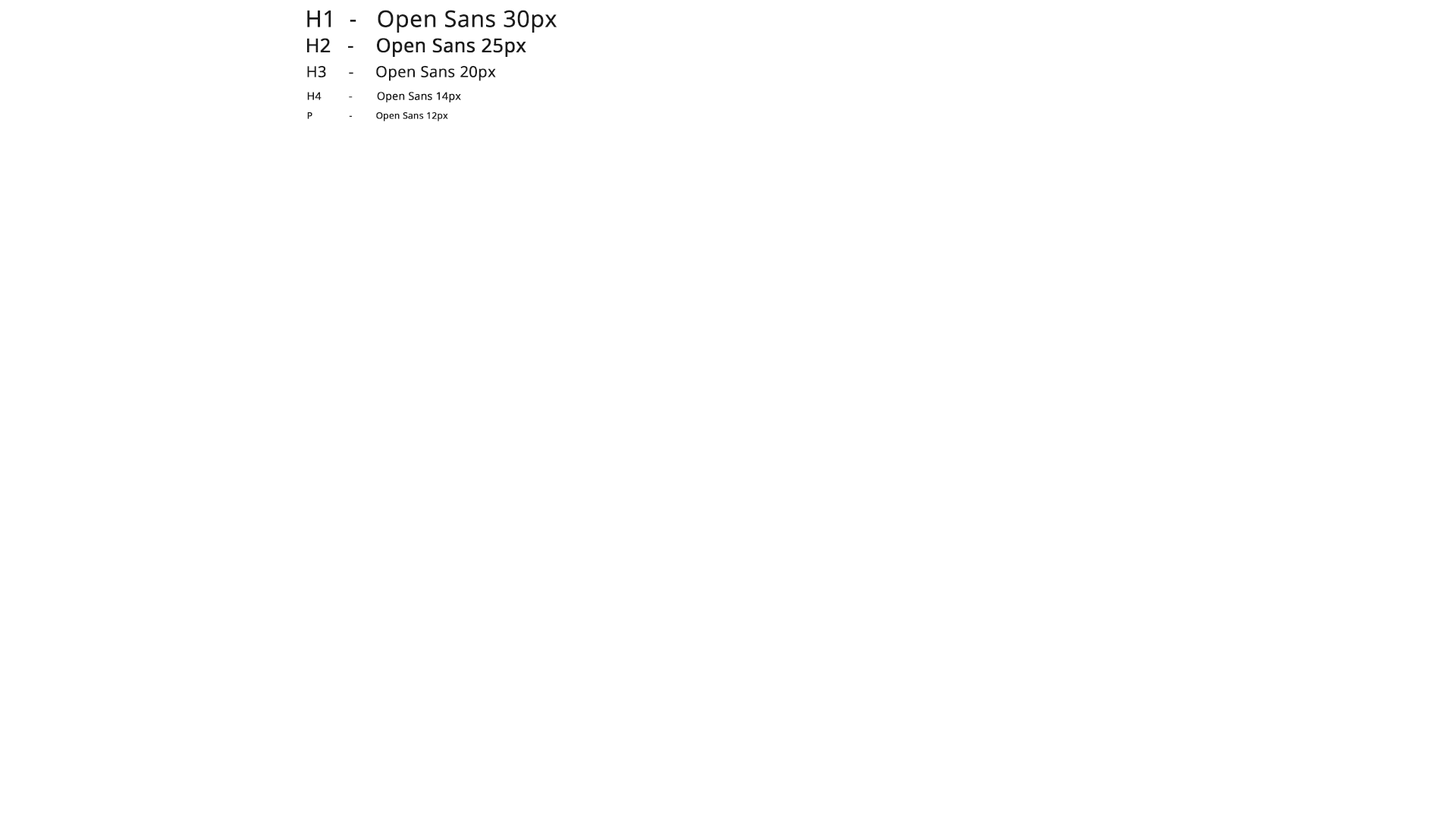
<style>
.page{position:relative;width:1456px;height:819px;background:#ffffff}
.page>*{position:absolute;margin:0}
.t1{font:22.7px "OpenSans-Regular";color:#1b1b1b;font-weight:bold}
.t2{font:19px "OpenSans-Regular";color:#1b1b1b;font-weight:bold}
.t3{font:15.2px "OpenSans-Regular";color:#1b1b1b;font-weight:bold}
.t4{font:10.6px "OpenSans-Regular";color:#1b1b1b;font-weight:bold}
.t5{font:9.1px "OpenSans-Regular";color:#1b1b1b;font-weight:bold}
</style>
<div class="page">
<p class="t1" style="left:307px;top:10px;width:250px;height:23px">H1  -   Open Sans 30px</p>
<p class="t2" style="left:307px;top:38px;width:219px;height:19px">H2   -    Open Sans 25px</p>
<p class="t3" style="left:307px;top:66px;width:189px;height:15px">H3     -     Open Sans 20px</p>
<p class="t4" style="left:307px;top:92px;width:154px;height:10px">H4         -        Open Sans 14px</p>
<p class="t5" style="left:307px;top:112px;width:141px;height:9px">P              -         Open Sans 12px</p>
</div>
